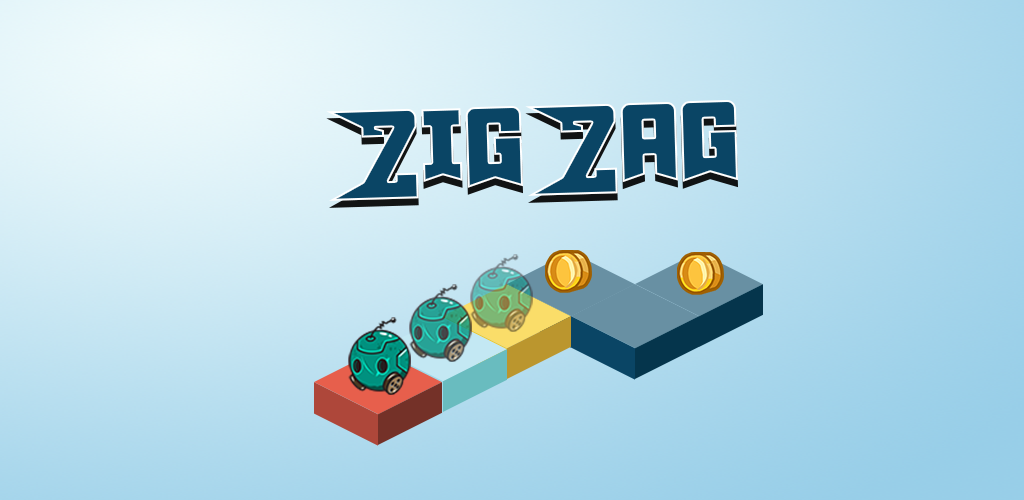
<style>
.page{position:relative;width:1024px;height:500px}
.page>*{position:absolute;margin:0}
.t1{font:178.9px "Robus";color:#0a4565}
</style>
<div class="page">
<p class="t1" style="left:326px;top:100px;width:412px;height:101px;rotate:-2deg">ZigZag</p>
</div>
